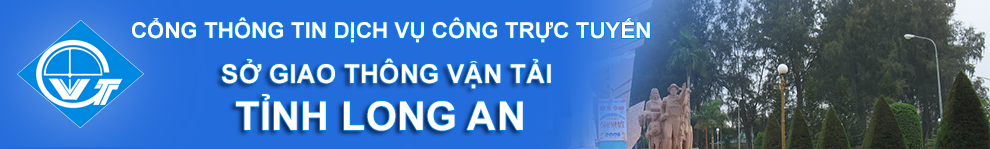
<style>
.page{position:relative;width:990px;height:149px;background:#236cdb}
.page>*{position:absolute;margin:0}
.t1{font:22px "Arial-BoldMT";letter-spacing:0.01em;color:#ffffff;text-transform:uppercase}
.t2{font:26.2px "Arial-BoldMT";letter-spacing:0.01em;color:#ffffff;text-transform:uppercase}
.t3{font:39.8px "Arial-BoldMT";letter-spacing:0.01em;color:#ffffff;text-transform:uppercase}
</style>
<div class="page">
<p class="t1" style="left:132px;top:17px;width:518px;height:26px">CỔNG THÔNG TIN DỊCH VỤ CÔNG TRỰC TUYẾN</p>
<p class="t2" style="left:222px;top:58px;width:329px;height:31px">sở giao thông vận tải</p>
<p class="t3" style="left:236px;top:94px;width:287px;height:37px">tỉnh long an</p>
</div>
